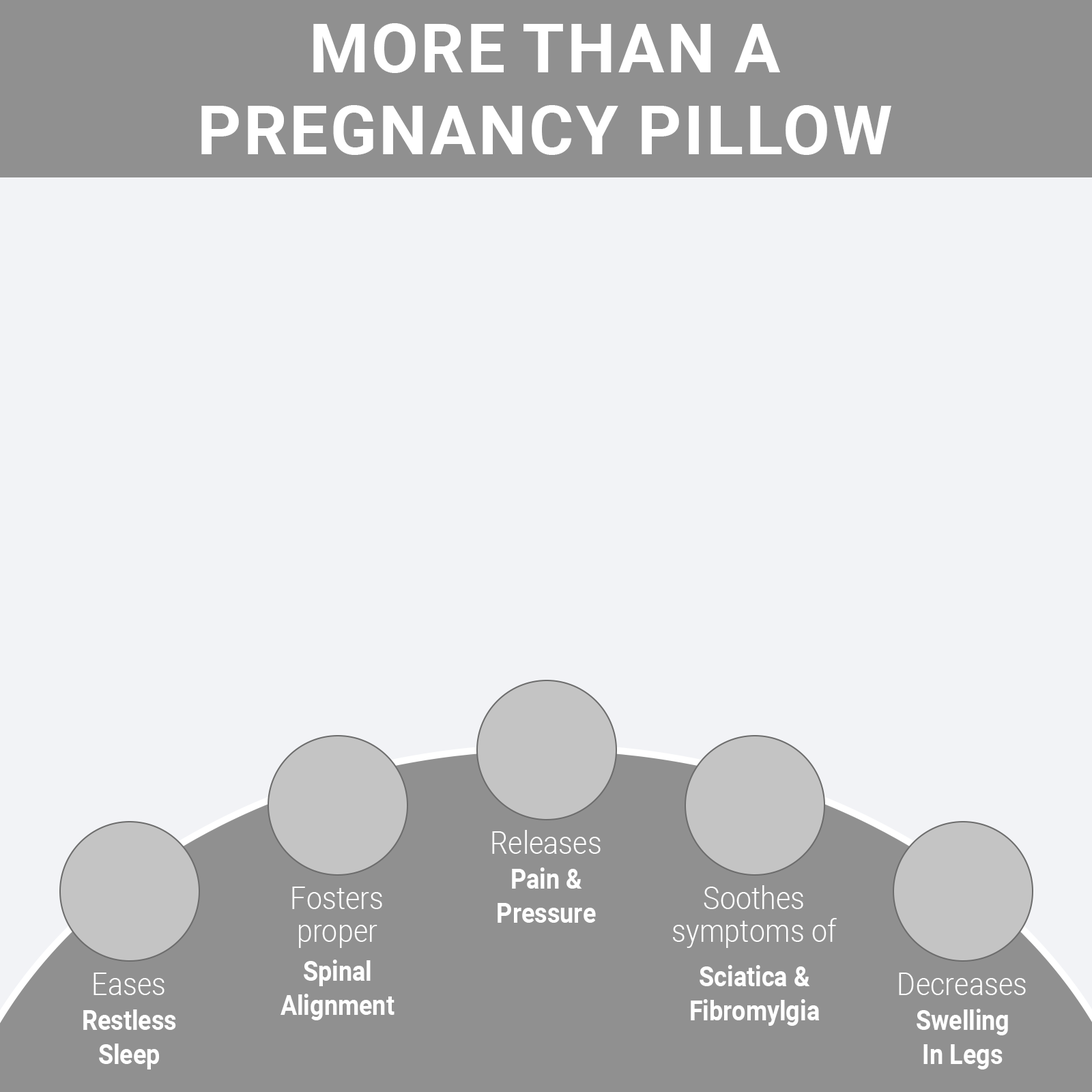
<style>
.page{position:relative;width:1092px;height:1092px;background:#f2f3f6}
.page>*{position:absolute;margin:0}
.t1{font:68.2px "Roboto-Bold";color:#ffffff;text-transform:uppercase}
.t2{font:31.4px "Roboto-Light";color:#ffffff;scale:0.9 1}
.t3{font:27.3px/34.1px "Roboto-Bold";color:#ffffff;scale:0.9 1}
.t4{font:31.4px/32.8px "Roboto-Light";color:#ffffff;scale:0.9 1}
</style>
<div class="page">
<p class="t1" style="left:201px;top:23px;width:690px;height:132px;text-align:center">More than a<br>pregnancy pillow</p>
<p class="t2" style="left:492px;top:830px;width:109px;height:24px">Releases</p>
<p class="t3" style="left:498px;top:867px;width:98px;height:56px;text-align:center">Pain &amp;<br>Pressure</p>
<p class="t4" style="left:292px;top:887px;width:90px;height:61px;text-align:center">Fosters<br>proper</p>
<p class="t4" style="left:673px;top:885px;width:164px;height:63px;text-align:center">Soothes<br>symptoms of</p>
<p class="t3" style="left:281px;top:960px;width:113px;height:60px;text-align:center">Spinal<br>Alignment</p>
<p class="t3" style="left:691px;top:965px;width:129px;height:61px;text-align:center">Sciatica &amp;<br>Fibromylgia</p>
<p class="t2" style="left:94px;top:973px;width:70px;height:22px">Eases</p>
<p class="t2" style="left:899px;top:973px;width:127px;height:22px">Decreases</p>
<p class="t3" style="left:83px;top:1009px;width:93px;height:60px;text-align:center">Restless<br>Sleep</p>
<p class="t3" style="left:917px;top:1009px;width:91px;height:60px;text-align:center">Swelling<br>In Legs</p>
</div>
